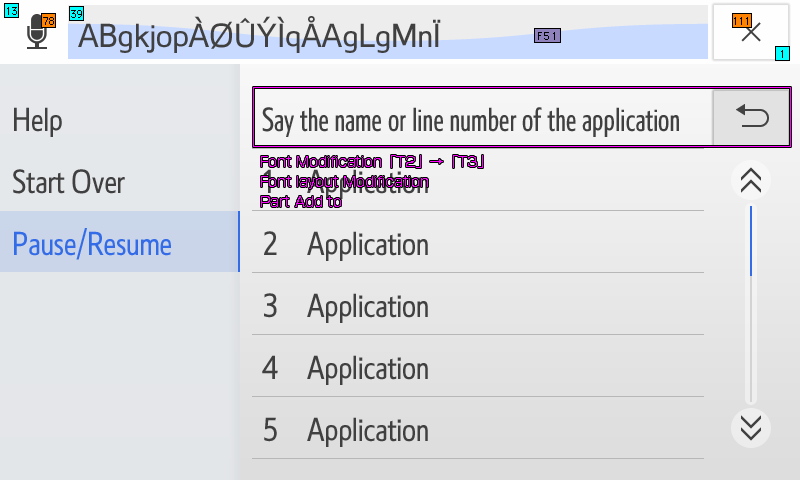
<style>
.page{position:relative;width:800px;height:480px}
.page>*{position:absolute;margin:0}
.t1{font:30px "Tfont1502_T1S";color:#404041}
.t2{font:30px "Tfont1502_T2S";color:#404041}
.t3{font:30px "Tfont1502_T3S";color:#404040}
.t4{font:14px/20px "ShinGoPro-Regular";color:#ff00ff}
.t5{font:30px/62px "Tfont1502_T2S";color:#404040}
.t6{font:30px "Tfont1502_T2S";color:#336ce6}
</style>
<div class="page">
<p class="t1" style="left:78px;top:16px;width:363px;height:37px">ABgkjopÀØÛÝÌqÅAgLgMnÏ</p>
<p class="t2" style="left:14px;top:107px;width:48px;height:30px">Help</p>
<p class="t3" style="left:262px;top:107px;width:417px;height:30px">Say the name or line number of the application</p>
<p class="t4" style="left:261px;top:155px;width:222px;height:52px">Font Modification「T2」→「T3」<br>Font layout Modification<br>Part Add to</p>
<p class="t2" style="left:13px;top:169px;width:112px;height:25px">Start Over</p>
<p class="t5" style="left:262px;top:169px;width:16px;height:273px">1<br>2<br>3<br>4<br>5</p>
<p class="t5" style="left:307px;top:169px;width:121px;height:278px">Application<br>Application<br>Application<br>Application<br>Application</p>
<p class="t6" style="left:14px;top:228px;width:157px;height:32px">Pause/Resume</p>
</div>
